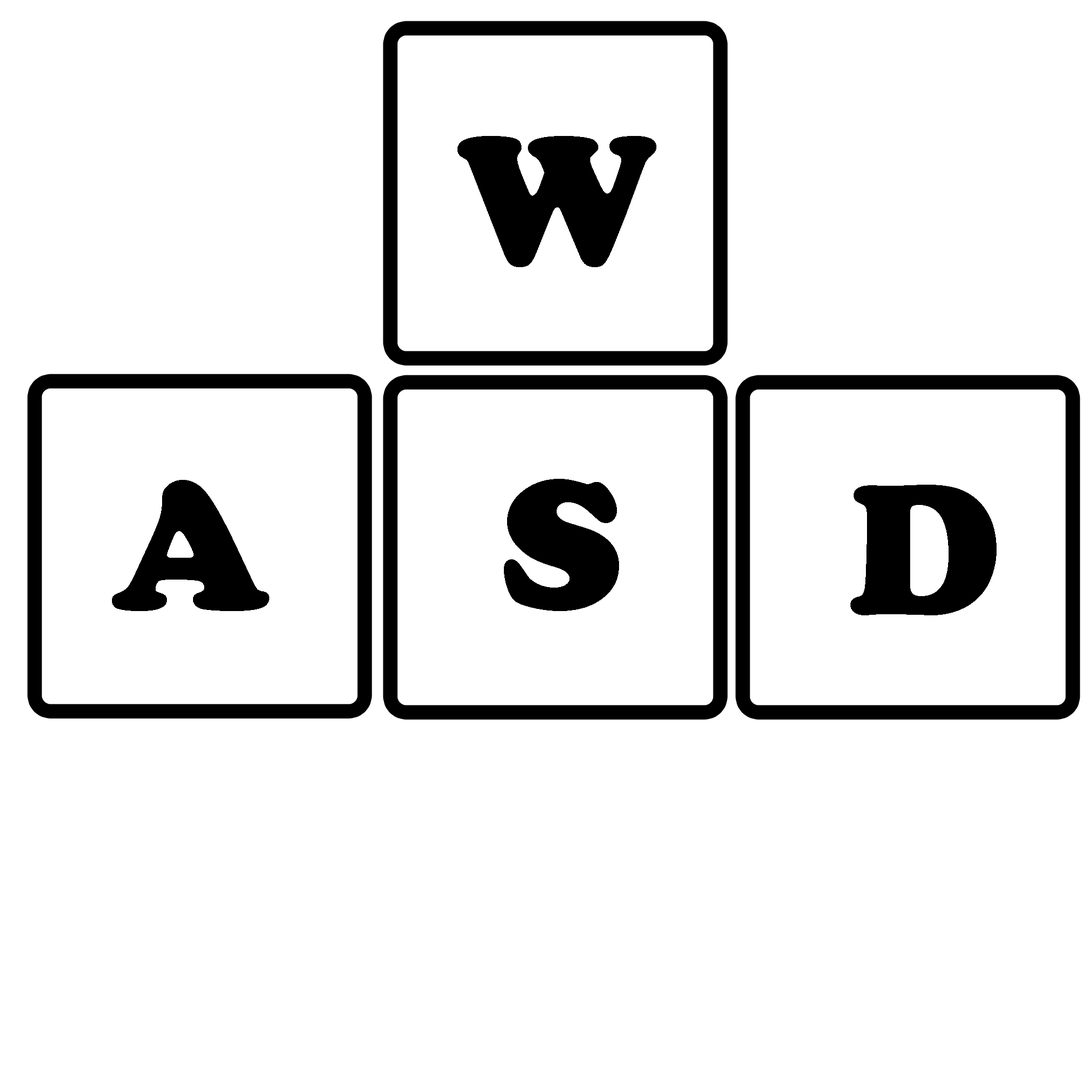
<style>
.page{position:relative;width:1092px;height:1092px;background:#ffffff}
.page>*{position:absolute;margin:0}
.t1{font:190.4px "CooperBlack";letter-spacing:0.01em;color:#000000}
</style>
<div class="page">
<p class="t1" style="left:457px;top:136px;width:199px;height:131px">W</p>
<p class="t1" style="left:112px;top:480px;width:157px;height:131px">A</p>
<p class="t1" style="left:504px;top:479px;width:115px;height:132px">S</p>
<p class="t1" style="left:850px;top:485px;width:147px;height:130px">D</p>
</div>
